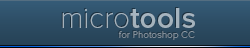
<style>
.page{position:relative;width:250px;height:48px}
.page>*{position:absolute;margin:0}
.t1{font:30px "ProximaNovaT-Thin";color:#a5b3bd}
.t2{font:30px "ProximaNova-Semibold";color:#a5b3bd}
.t3{font:10px "ProximaNovaT-Thin"}
</style>
<div class="page">
<p class="t1" style="left:62px;top:8px;width:133px;height:20px">micro<span class="t2">tools</span></p>
<p class="t3" style="left:118px;top:31px;width:77px;height:9px">for Photoshop CC</p>
</div>
